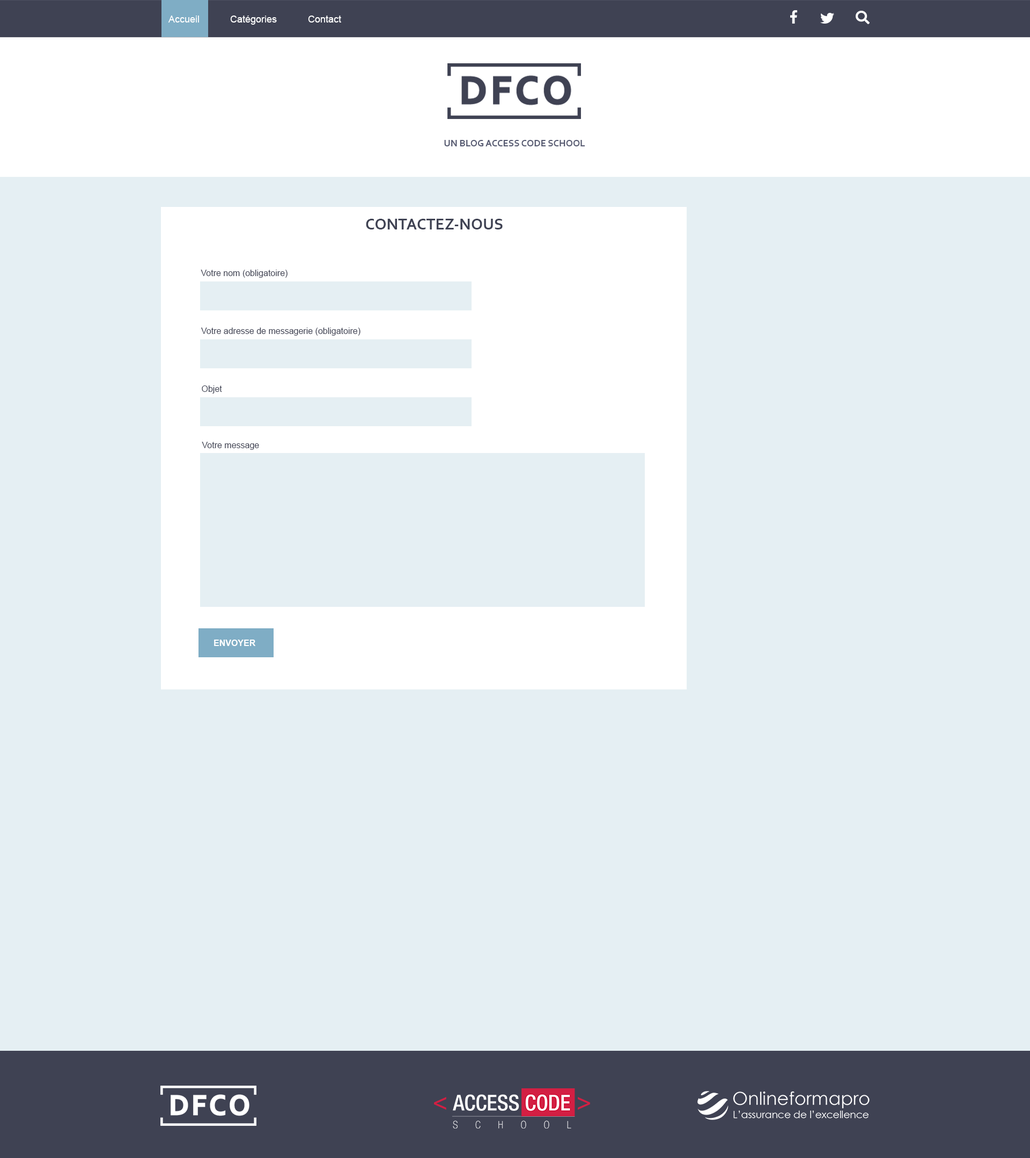
<style>
.page{position:relative;width:1030px;height:1158px;background:#e5eff3}
.page>*{position:absolute;margin:0}
.t1{font:9.7px "ArialMT";color:#ffffff}
.t2{font:9.7px "Corbel-Bold";color:#575b72}
.t3{font:16.1px "Corbel-Bold";color:#3f4253}
.t4{font:8.6px "ArialMT";color:#3f4253}
.t5{font:8.6px "Arial-BoldMT";color:#ffffff}
</style>
<div class="page">
<p class="t1" style="left:168px;top:16px;width:31px;height:7px">Accueil</p>
<p class="t1" style="left:230px;top:16px;width:47px;height:9px">Catégories</p>
<p class="t1" style="left:308px;top:16px;width:33px;height:7px">Contact</p>
<p class="t2" style="left:444px;top:140px;width:141px;height:6px">UN BLOG ACCESS CODE SCHOOL</p>
<p class="t3" style="left:366px;top:219px;width:136px;height:11px">CONTACTEZ-NOUS</p>
<p class="t4" style="left:201px;top:270px;width:86px;height:8px">Votre nom (obligatoire)</p>
<p class="t4" style="left:201px;top:328px;width:159px;height:8px">Votre adresse de messagerie (obligatoire)</p>
<p class="t4" style="left:202px;top:386px;width:20px;height:8px">Objet</p>
<p class="t4" style="left:202px;top:442px;width:57px;height:8px">Votre message</p>
<p class="t5" style="left:214px;top:640px;width:41px;height:6px">ENVOYER</p>
</div>
